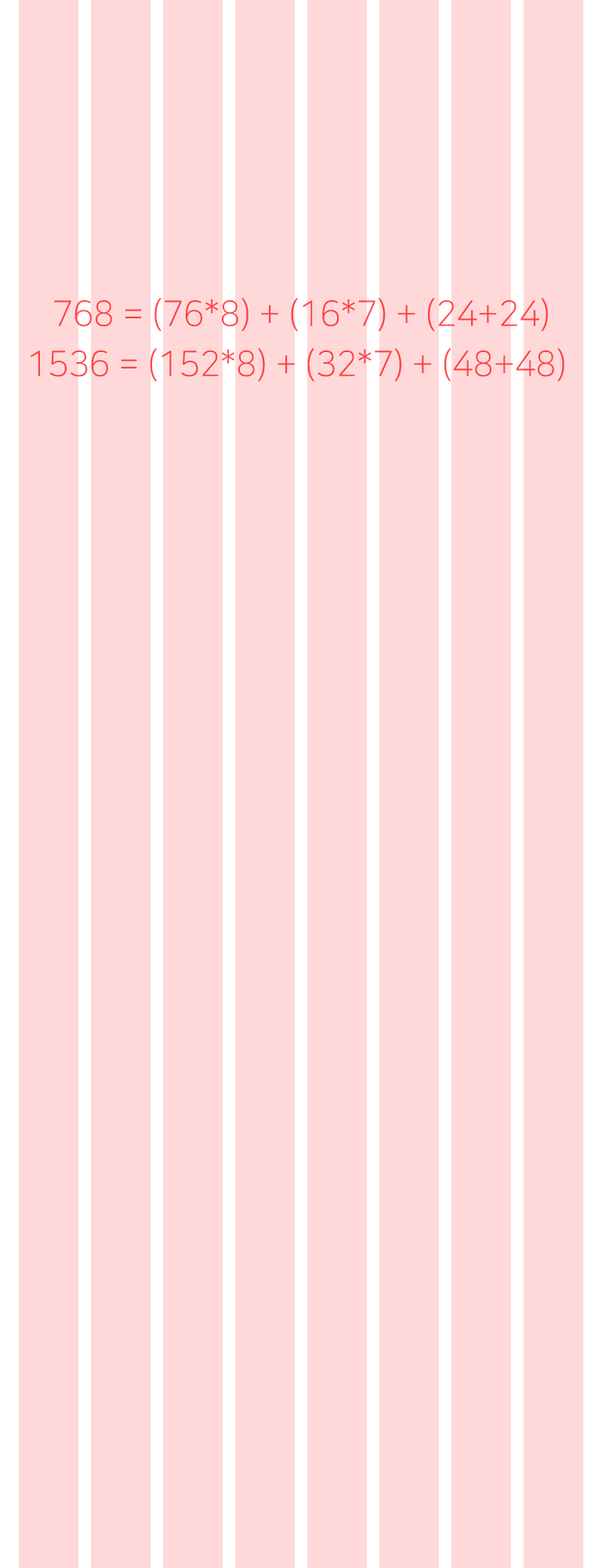
<style>
.page{position:relative;width:602px;height:1568px;background:#ffd9d9}
.page>*{position:absolute;margin:0}
.t1{font:35.1px "NanumSquareOTFL";color:#ff4c4c}
</style>
<div class="page">
<p class="t1" style="left:54px;top:298px;width:494px;height:34px">768 = (76*8) + (16*7) + (24+24)</p>
<p class="t1" style="left:30px;top:348px;width:534px;height:34px">1536 = (152*8) + (32*7) + (48+48)</p>
</div>
